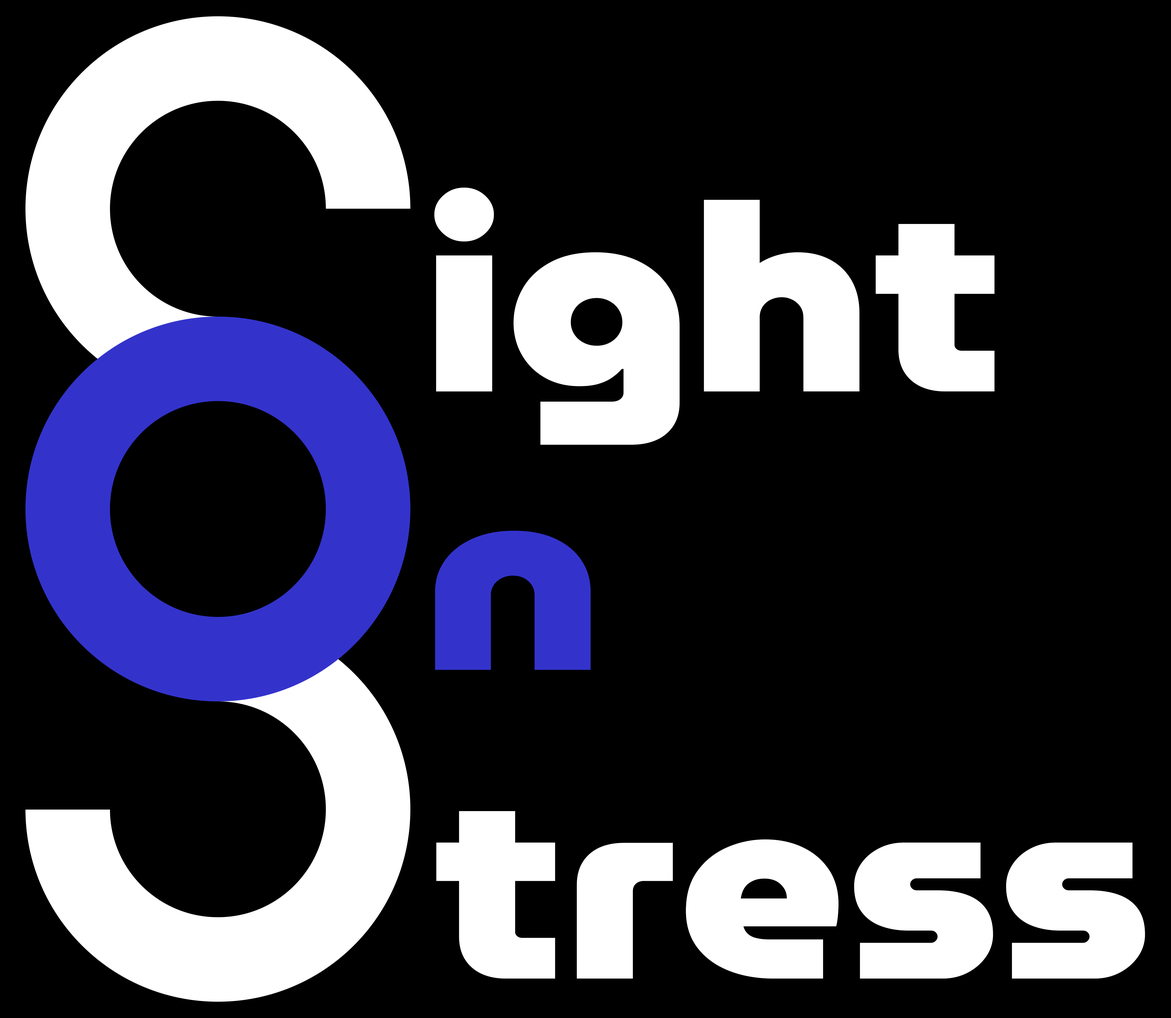
<style>
.page{position:relative;width:1171px;height:1018px;background:#000000}
.page>*{position:absolute;margin:0}
.t1{font:262.5px "MuseoModerno-Black";color:#ffffff;scale:1.11 1}
.t2{font:262.5px "MuseoModerno-Black";color:#3333cc;scale:1.11 1}
</style>
<div class="page">
<p class="t1" style="left:434px;top:188px;width:561px;height:257px">ight</p>
<p class="t2" style="left:435px;top:531px;width:156px;height:139px">n</p>
<p class="t1" style="left:436px;top:811px;width:709px;height:168px">tress</p>
</div>
